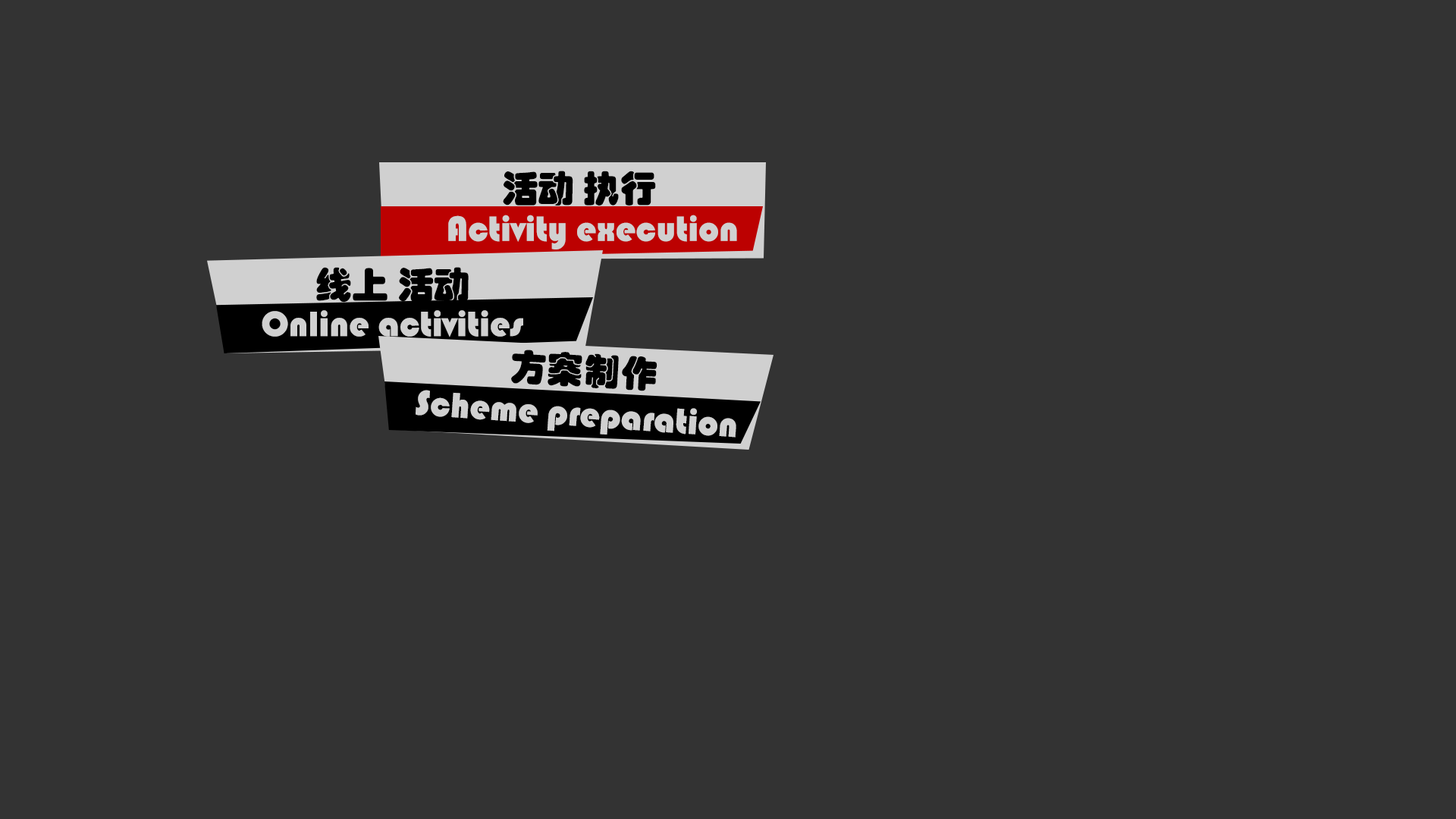
<style>
.page{position:relative;width:1456px;height:819px;background:#333333}
.page>*{position:absolute;margin:0}
.t1{font:36.4px "STHupo";color:#000000}
.t2{font:36.4px "STHupo";color:#d0d0d0}
</style>
<div class="page">
<p class="t1" style="left:503px;top:171px;width:153px;height:35px">活动 执行</p>
<p class="t2" style="left:448px;top:215px;width:289px;height:34px">Activity execution</p>
<p class="t1" style="left:316px;top:267px;width:153px;height:36px">线上 活动</p>
<p class="t2" style="left:262px;top:310px;width:261px;height:27px">Online activities</p>
<p class="t1" style="left:511px;top:350px;width:146px;height:41px;rotate:3deg">方案制作</p>
<p class="t2" style="left:416px;top:390px;width:320px;height:48px;rotate:4deg">Scheme preparation</p>
</div>
